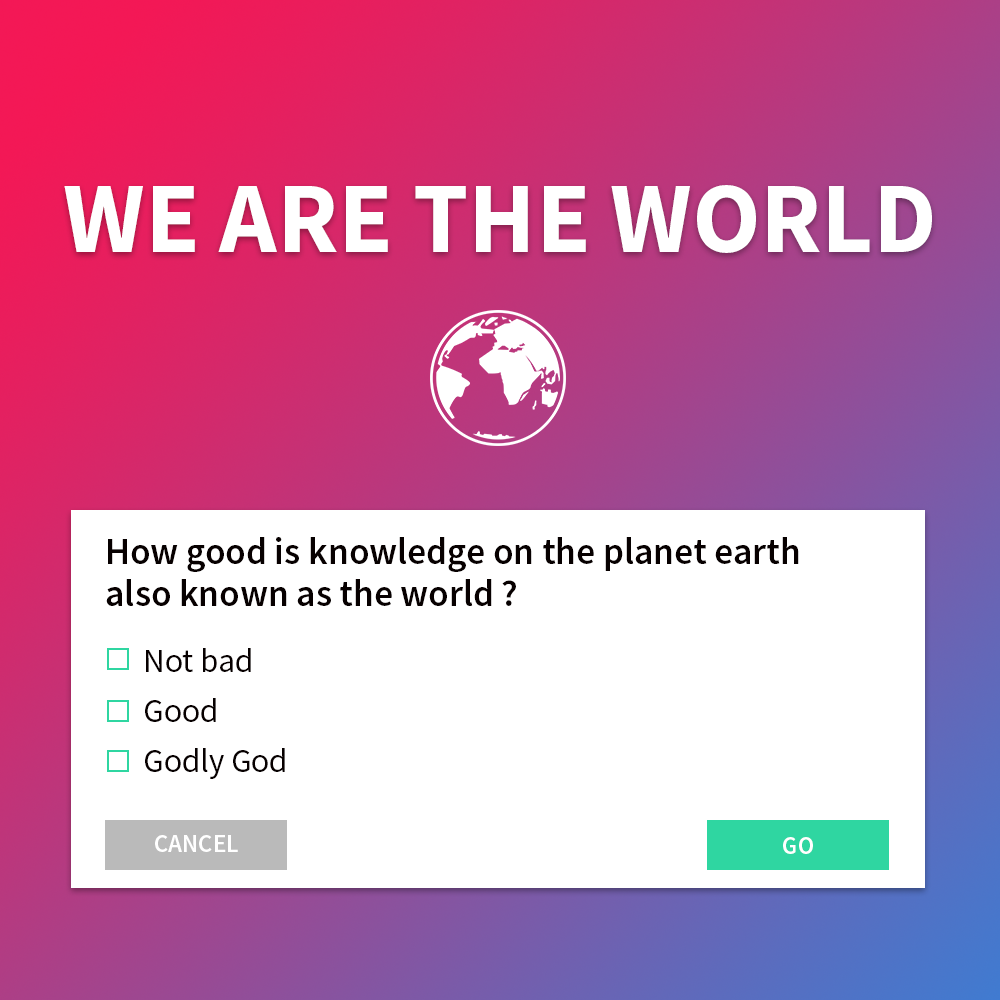
<style>
.page{position:relative;width:1000px;height:1000px;background:#ffffff}
.page>*{position:absolute;margin:0}
.t1{font:100px "SourceSansPro-Bold";color:#ffffff;text-transform:uppercase}
.t2{font:37.5px/41.7px "SourceSansPro-Semibold";color:#070000}
.t3{font:33.3px/25px "SourceSansPro-Regular";color:#070000}
.t4{font:25px "SourceSansPro-Semibold";color:#ffffff;text-transform:uppercase}
</style>
<div class="page">
<p class="t1" style="left:64px;top:185px;width:868px;height:68px">we are the world</p>
<p class="t2" style="left:106px;top:537px;width:693px;height:69px">How good is knowledge on the planet earth <br>also known as the world ?</p>
<p class="t3" style="left:145px;top:648px;width:140px;height:131px">Not bad<br><br>Good<br><br>Godly God</p>
<p class="t4" style="left:155px;top:835px;width:83px;height:17px">cancel</p>
<p class="t4" style="left:783px;top:837px;width:30px;height:17px">go</p>
</div>
